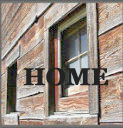
<style>
.page{position:relative;width:123px;height:128px}
.page>*{position:absolute;margin:0}
.t1{font:23.9px "Georgia-Bold";color:#232323;font-weight:bold}
</style>
<div class="page">
<p class="t1" style="left:23px;top:67px;width:86px;height:19px">HOME</p>
</div>
